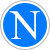
<style>
.page{position:relative;width:50px;height:50px;background:#007aff}
.page>*{position:absolute;margin:0}
.t1{font:41.7px "TimesNewRomanPSMT";letter-spacing:-0.01em;color:#ffffff}
</style>
<div class="page">
<p class="t1" style="left:9px;top:11px;width:31px;height:29px">N</p>
</div>
